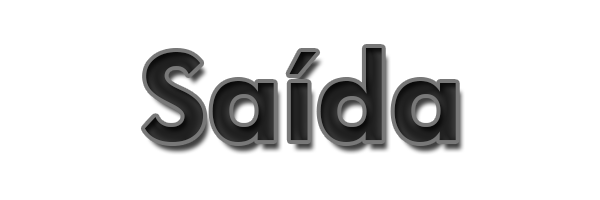
<style>
.page{position:relative;width:600px;height:200px;background:#ffffff}
.page>*{position:absolute;margin:0}
.t1{font:120px "FuturaBT-Heavy";color:#212121}
</style>
<div class="page">
<p class="t1" style="left:144px;top:48px;width:312px;height:94px">Saída</p>
</div>
